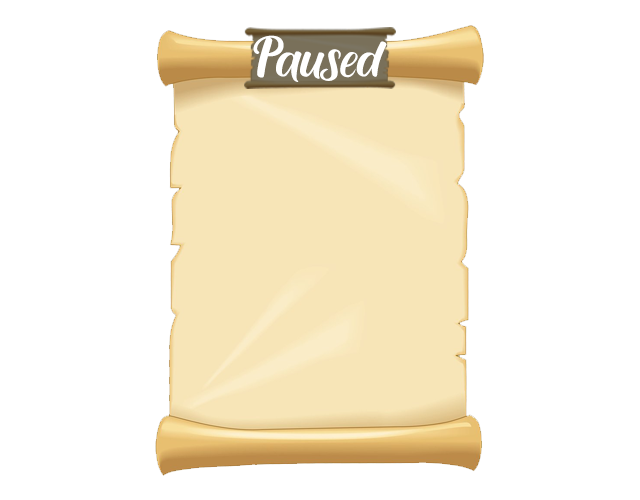
<style>
.page{position:relative;width:640px;height:500px;background:#ffffff}
.page>*{position:absolute;margin:0}
.t1{font:48px "CreamPeach-Regular";color:#ffffff}
</style>
<div class="page">
<p class="t1" style="left:253px;top:35px;width:134px;height:47px">Paused</p>
</div>
